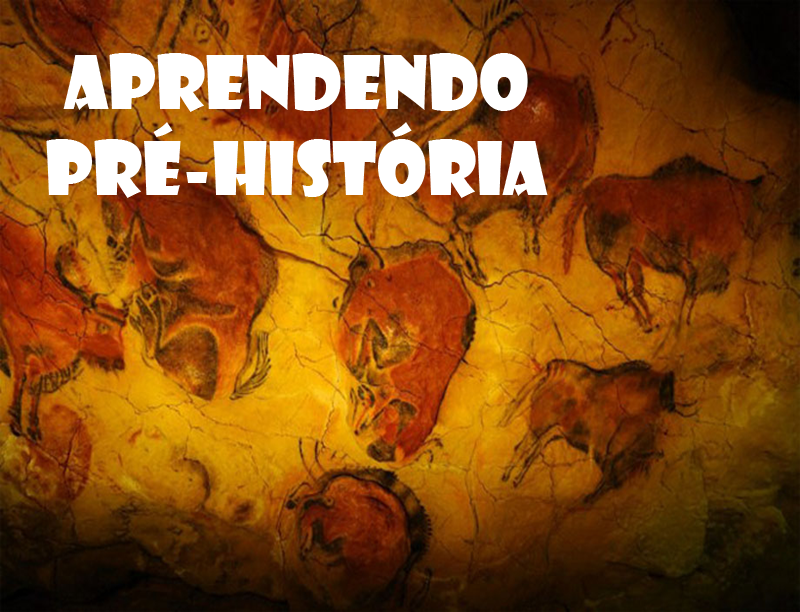
<style>
.page{position:relative;width:800px;height:612px}
.page>*{position:absolute;margin:0}
.t1{font:72px "ShowcardGothic-Reg";color:#ffffff}
</style>
<div class="page">
<p class="t1" style="left:46px;top:53px;width:502px;height:145px;text-align:center">Aprendendo<br>Pré-História</p>
</div>
